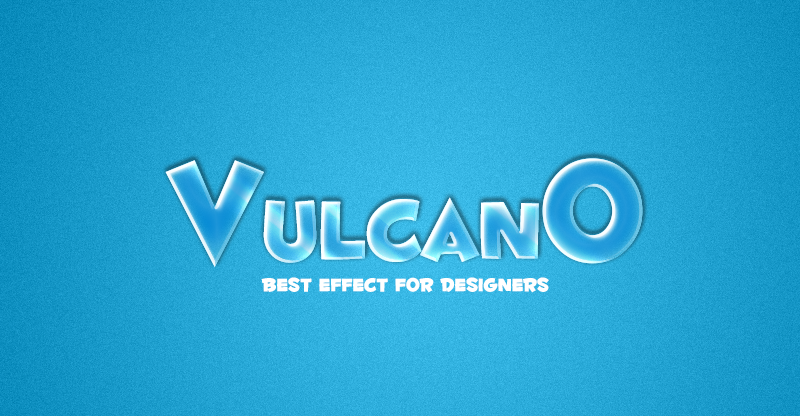
<style>
.page{position:relative;width:800px;height:416px}
.page>*{position:absolute;margin:0}
.t1{font:100px "FontdinerdotcomHuggable"}
.t2{font:165px "FontdinerdotcomHuggable"}
.t3{font:22px "FontdinerdotcomHuggable";color:#ffffff}
</style>
<div class="page">
<p class="t1" style="left:165px;top:158px;width:478px;height:109px"><span class="t2">V</span>ulcan<span class="t2">o</span></p>
<p class="t3" style="left:261px;top:277px;width:288px;height:16px">best effect for designers</p>
</div>
